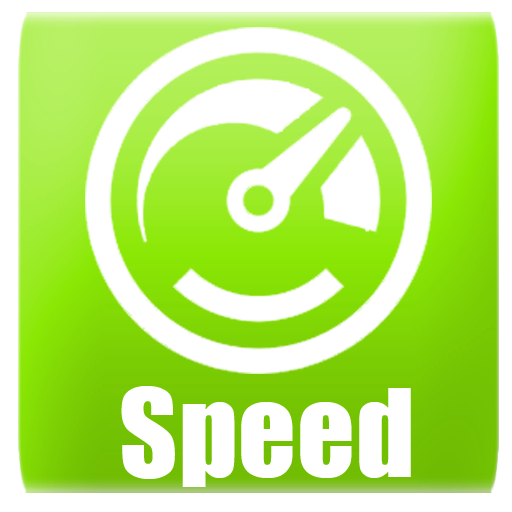
<style>
.page{position:relative;width:512px;height:512px;background:#ffffff}
.page>*{position:absolute;margin:0}
.t1{font:112.7px "Impact";letter-spacing:0.012em;color:#ffffff}
</style>
<div class="page">
<p class="t1" style="left:121px;top:386px;width:290px;height:101px">Speed</p>
</div>
